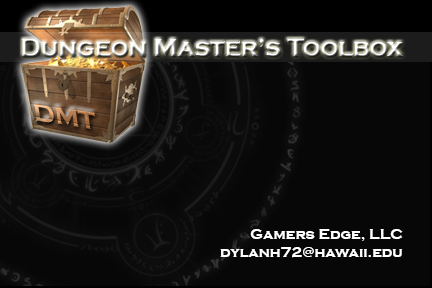
<style>
.page{position:relative;width:432px;height:288px;background:#070707}
.page>*{position:absolute;margin:0}
.t1{font:25px "CopperplateGothic-Bold"}
.t2{font:25.8px "CopperplateGothic-Bold"}
.t3{font:15px "CopperplateGothic-Bold";color:#ffffff}
</style>
<div class="page">
<p class="t1" style="left:22px;top:38px;width:381px;height:19px">Dungeon Master’s Toolbox</p>
<p class="t2" style="left:33px;top:103px;width:62px;height:26px;rotate:10deg">DMT</p>
<p class="t3" style="left:220px;top:229px;width:183px;height:29px;text-align:right">Gamers Edge, LLC<br>dylanh72@hawaii.edu</p>
</div>
